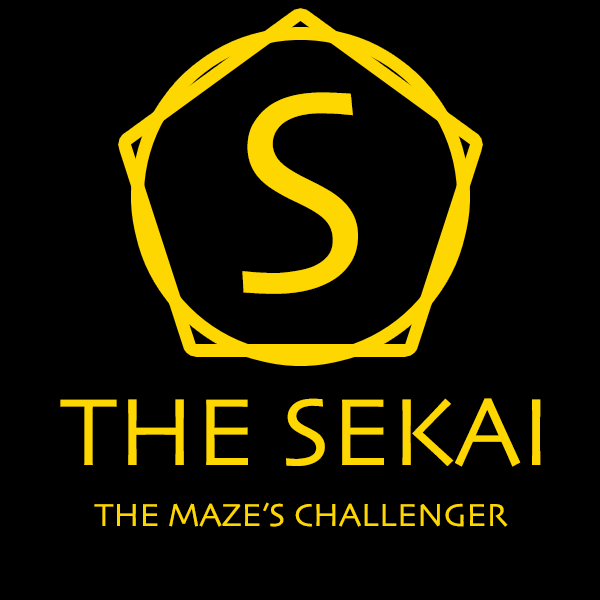
<style>
.page{position:relative;width:600px;height:600px;background:#000000}
.page>*{position:absolute;margin:0}
.t1{font:300px "Skia-Regular";color:#ffd700}
.t2{font:100px "Skia-Regular";color:#ffd700}
.t3{font:33.3px "Skia-Regular";color:#ffd700}
</style>
<div class="page">
<p class="t1" style="left:242px;top:92px;width:116px;height:202px">S</p>
<p class="t2" style="left:60px;top:398px;width:481px;height:69px">THE SEKAI</p>
<p class="t3" style="left:94px;top:502px;width:414px;height:25px">THE MAZE’S CHALLENGER</p>
</div>
